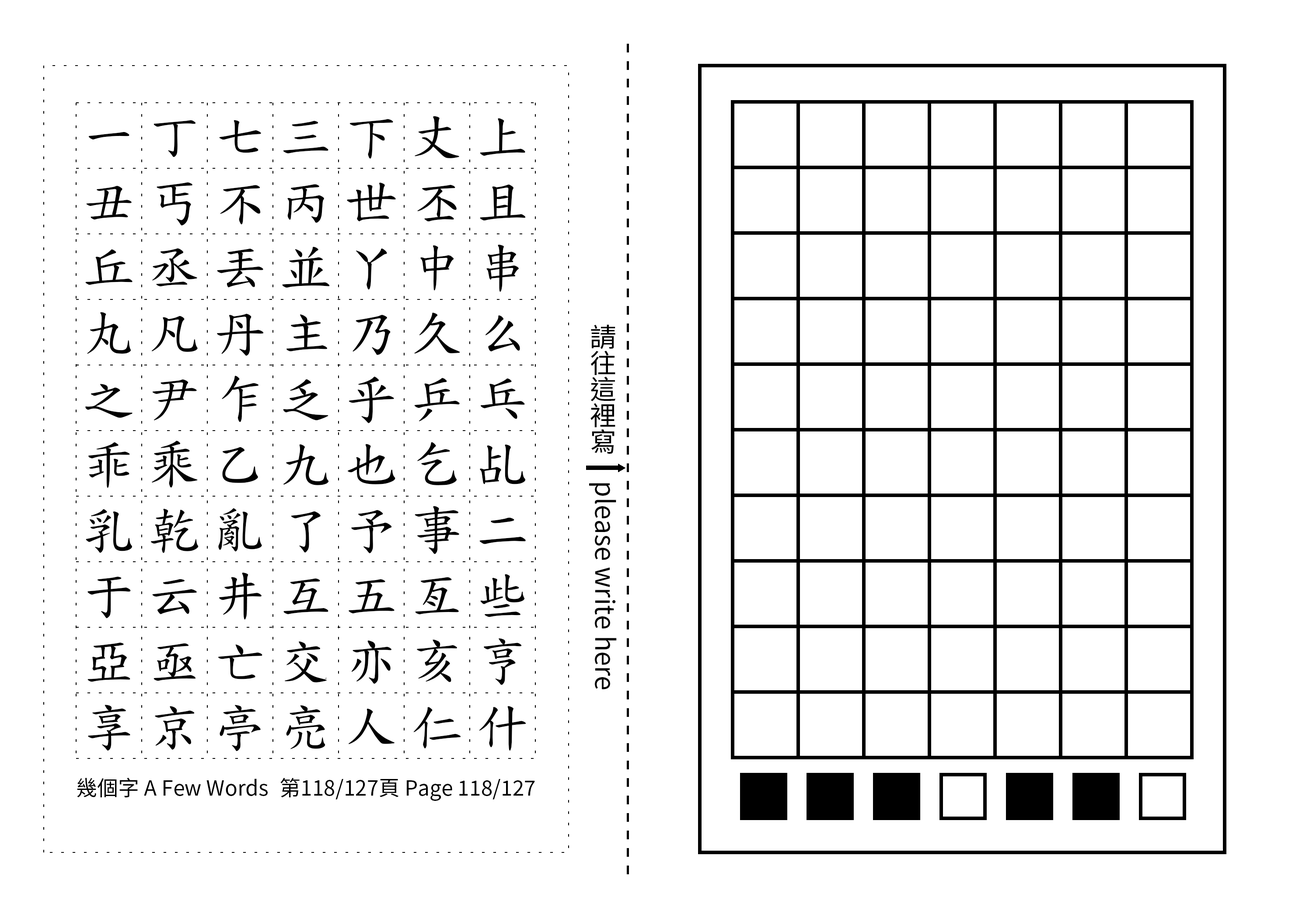
<style>
.page{position:relative;width:1299px;height:918px;background:#ffffff}
.page>*{position:absolute;margin:0}
.t1{font:52.5px/65.6px "TW-Kai-98_1";letter-spacing:0.25em;color:#000000}
.t2{font:26.2px "SourceHanSansTC-Regular";color:#000000}
.t3{font:21px "SourceHanSansTC-Regular";color:#000000}
</style>
<div class="page">
<p class="t1" style="left:85px;top:116px;width:441px;height:636px;text-align:center">一丁七三下丈上丑丐不丙世丕且丘丞丟並丫中串丸凡丹主乃久么之尹乍乏乎乒乓乖乘乙九也乞乩乳乾亂了予事二于云井互五亙些亞亟亡交亦亥亨享京亭亮人仁什</p>
<p class="t2" style="left:589px;top:324px;width:28px;height:366px;text-align:center">請往這裡寫　please write here</p>
<p class="t3" style="left:77px;top:778px;width:191px;height:20px">幾個字 A Few Words</p>
<p class="t3" style="left:280px;top:778px;width:255px;height:23px">第118/127頁 Page 118/127</p>
</div>
